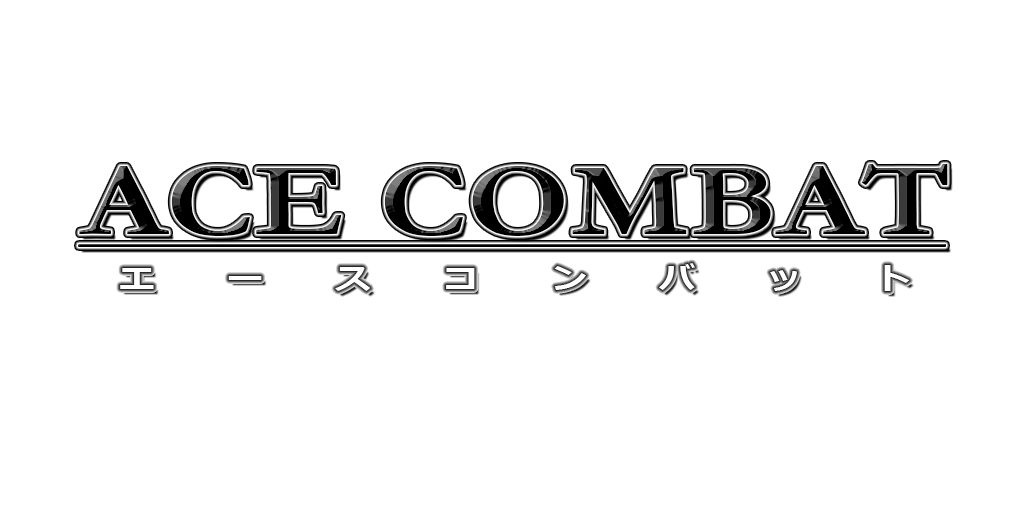
<style>
.page{position:relative;width:1024px;height:512px;background:#ffffff}
.page>*{position:absolute;margin:0}
.t1{font:104px "Garamond-Bold";color:#000000;scale:1.25 1}
</style>
<div class="page">
<p class="t1" style="left:79px;top:164px;width:869px;height:72px">ACE COMBAT</p>
</div>
